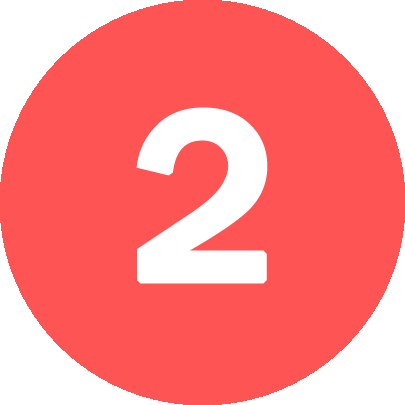
<style>
.page{position:relative;width:405px;height:405px;background:#ff5454}
.page>*{position:absolute;margin:0}
.t1{font:250px "FranklinGothic-Medium";color:#ffffff;font-weight:bold}
</style>
<div class="page">
<p class="t1" style="left:136px;top:107px;width:132px;height:177px">2</p>
</div>
